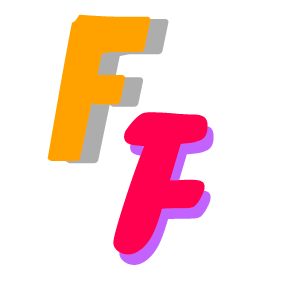
<style>
.page{position:relative;width:283px;height:283px;background:#ffffff}
.page>*{position:absolute;margin:0}
.t1{font:209.7px "pixeldead-Italic";color:#ffa200}
.t2{font:209.7px "pixeldead-Italic"}
.t3{font:209.7px "ForteMT";color:#ff004e}
</style>
<div class="page">
<p class="t1" style="left:47px;top:14px;width:104px;height:147px">F</p>
<p class="t2" style="left:65px;top:17px;width:104px;height:147px">F</p>
<p class="t3" style="left:113px;top:112px;width:95px;height:143px">F</p>
<p class="t3" style="left:119px;top:122px;width:95px;height:143px">F</p>
</div>
